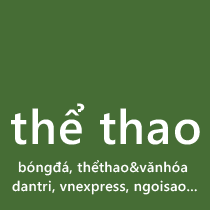
<style>
.page{position:relative;width:210px;height:210px;background:#466d35}
.page>*{position:absolute;margin:0}
.t1{font:48px "SegoeWP-Semibold";letter-spacing:0.025em;color:#ffffff}
.t2{font:14px "SegoeWP-Semibold";letter-spacing:0.025em;color:#fefefe}
.t3{font:14px "SegoeWP-Semibold";letter-spacing:0.025em;color:#ffffff}
</style>
<div class="page">
<p class="t1" style="left:11px;top:103px;width:189px;height:42px">thể thao</p>
<p class="t2" style="left:18px;top:160px;width:170px;height:16px">bóngđá, thểthao&amp;vănhóa</p>
<p class="t3" style="left:12px;top:180px;width:185px;height:15px">dantri, vnexpress, ngoisao...</p>
</div>
